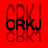
<style>
.page{position:relative;width:48px;height:48px;background:#ff0000}
.page>*{position:absolute;margin:0}
.t1{font:38.5px "ArialMT";scale:0.36 1}
.t2{font:14.4px "ArialMT";color:#000000;scale:0.96 1}
.t3{font:14.4px "ArialMT";color:#7f0000;scale:0.96 1}
</style>
<div class="page">
<p class="t1" style="left:6px;top:4px;width:35px;height:28px">CRKJ</p>
<p class="t2" style="left:6px;top:20px;width:35px;height:10px">CRKJ</p>
<p class="t2" style="left:6px;top:19px;width:35px;height:10px">CRKJ</p>
<p class="t3" style="left:6px;top:32px;width:35px;height:10px">CRKJ</p>
</div>
